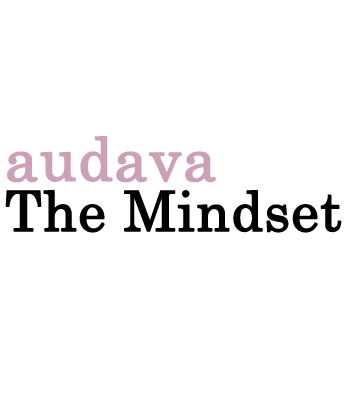
<style>
.page{position:relative;width:352px;height:416px;background:#ffffff}
.page>*{position:absolute;margin:0}
.t1{font:60px "CenturySchoolbook";color:#cca0b6;font-weight:bold}
.t2{font:55px "CenturySchoolbook";color:#000000;font-weight:bold}
</style>
<div class="page">
<p class="t1" style="left:7px;top:135px;width:210px;height:48px">audava</p>
<p class="t2" style="left:5px;top:189px;width:337px;height:44px">The Mindset</p>
</div>
